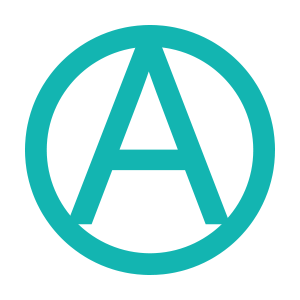
<style>
.page{position:relative;width:300px;height:300px;background:#ffffff}
.page>*{position:absolute;margin:0}
.t1{font:251.8px "DengXian";color:#13b5b1;font-weight:bold}
</style>
<div class="page">
<p class="t1" style="left:68px;top:44px;width:161px;height:181px">A</p>
</div>
